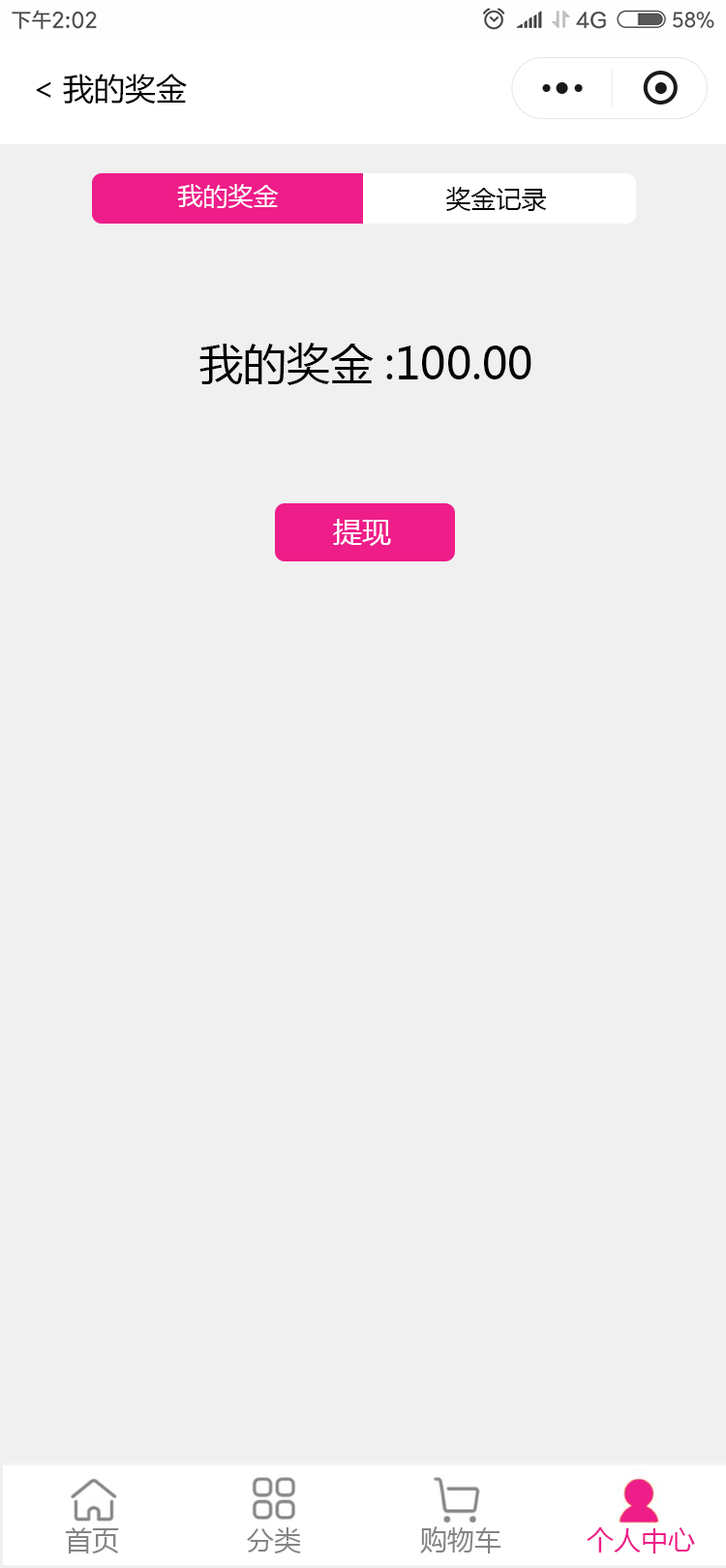
<style>
.page{position:relative;width:726px;height:1568px;background:#f0f0f0}
.page>*{position:absolute;margin:0}
.t1{font:31px "MicrosoftYaHei";color:#000000}
.t2{font:25.2px "MicrosoftYaHei";color:#ffffff}
.t3{font:25.2px "MicrosoftYaHei";color:#000000}
.t4{font:43.6px "MicrosoftYaHei";color:#000000}
.t5{font:29px "MicrosoftYaHei";color:#ffffff}
</style>
<div class="page">
<p class="t1" style="left:36px;top:74px;width:151px;height:31px">&lt;我的奖金</p>
<p class="t2" style="left:177px;top:184px;width:102px;height:24px">我的奖金</p>
<p class="t3" style="left:445px;top:187px;width:102px;height:24px">奖金记录</p>
<p class="t4" style="left:199px;top:343px;width:332px;height:42px">我的奖金:100.00</p>
<p class="t5" style="left:333px;top:519px;width:58px;height:27px">提现</p>
</div>
